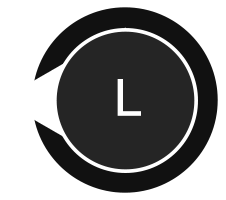
<style>
.page{position:relative;width:226px;height:200px;background:#ffffff}
.page>*{position:absolute;margin:0}
.t1{font:51.1px "ArialMT";color:#ffffff}
</style>
<div class="page">
<p class="t1" style="left:117px;top:79px;width:24px;height:37px">L</p>
</div>
